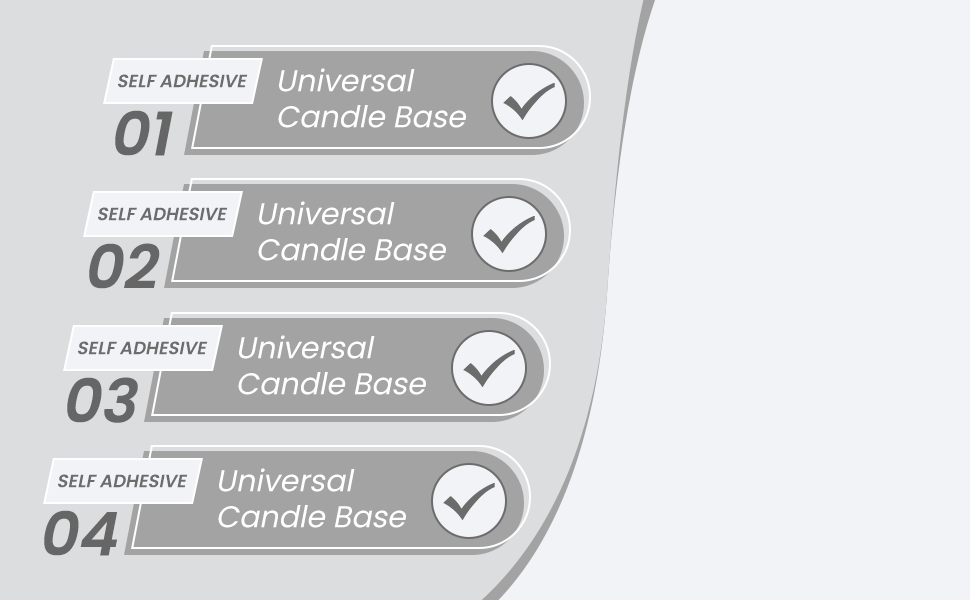
<style>
.page{position:relative;width:970px;height:600px;background:#f2f3f6}
.page>*{position:absolute;margin:0}
.t1{font:18px "Poppins-SemiBold";color:#6c6c6c;text-transform:uppercase;font-style:italic}
.t2{font:30px "Poppins-Regular";color:#ffffff;font-style:italic}
.t3{font:60px "Poppins-SemiBold";color:#666666;font-style:italic}
</style>
<div class="page">
<p class="t1" style="left:118px;top:74px;width:130px;height:14px">self adhesive</p>
<p class="t2" style="left:278px;top:68px;width:188px;height:60px">Universal<br>Candle Base</p>
<p class="t3" style="left:115px;top:110px;width:58px;height:46px">01</p>
<p class="t1" style="left:98px;top:207px;width:130px;height:14px">self adhesive</p>
<p class="t2" style="left:258px;top:201px;width:188px;height:60px">Universal<br>Candle Base</p>
<p class="t3" style="left:89px;top:243px;width:71px;height:46px">02</p>
<p class="t1" style="left:78px;top:341px;width:130px;height:14px">self adhesive</p>
<p class="t2" style="left:238px;top:335px;width:188px;height:60px">Universal<br>Candle Base</p>
<p class="t3" style="left:67px;top:377px;width:71px;height:46px">03</p>
<p class="t2" style="left:218px;top:468px;width:188px;height:60px">Universal<br>Candle Base</p>
<p class="t1" style="left:58px;top:474px;width:130px;height:14px">self adhesive</p>
<p class="t3" style="left:44px;top:510px;width:73px;height:46px">04</p>
</div>
